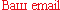
<style>
.page{position:relative;width:60px;height:10px;background:#ffffff}
.page>*{position:absolute;margin:0}
.t1{font:14px "TimesNewRomanPSMT";color:#e70e19}
</style>
<div class="page">
<p class="t1" style="left:2px;top:0px;width:58px;height:10px">Ваш email</p>
</div>
